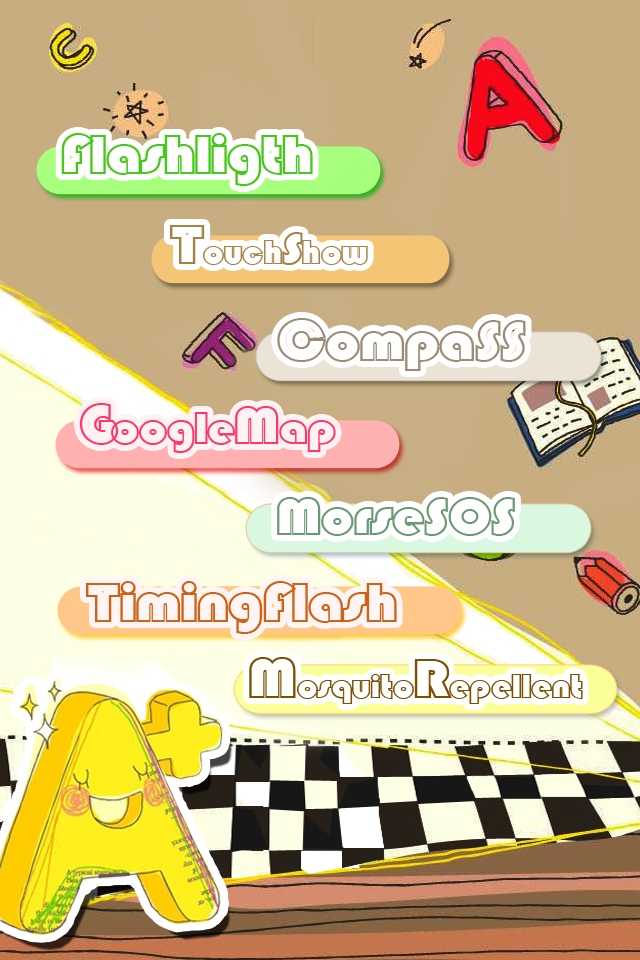
<style>
.page{position:relative;width:640px;height:960px;background:#c7ad80}
.page>*{position:absolute;margin:0}
.t1{font:56.2px "STCaiyun";color:#45c917;scale:1.11 1}
.t2{font:33.8px "STCaiyun";color:#a58244;scale:1.11 1}
.t3{font:56.2px "STCaiyun";color:#a58244;scale:1.11 1}
.t4{font:45px "STCaiyun";color:#a58244;scale:1.11 1}
.t5{font:56.2px "STCaiyun";color:#9a8d76;scale:1.11 1}
.t6{font:45px "STCaiyun";color:#ff376b;scale:1.11 1}
.t7{font:56.2px "STCaiyun";color:#ff376b;scale:1.11 1}
.t8{font:52.5px "STCaiyun";color:#ff376b;scale:1.11 1}
.t9{font:52.5px "STCaiyun";color:#6b9974;scale:1.11 1}
.t10{font:56.2px "STCaiyun";color:#cf6213;scale:1.11 1}
.t11{font:33.8px "STCaiyun";color:#7d4f00;scale:1.11 1}
.t12{font:56.2px "STCaiyun";color:#7d4f00;scale:1.11 1}
</style>
<div class="page">
<p class="t1" style="left:61px;top:133px;width:252px;height:53px">Flashligth</p>
<p class="t2" style="left:170px;top:225px;width:198px;height:40px"><span class="t3">T</span>ouch<span class="t4">S</span>how</p>
<p class="t5" style="left:277px;top:318px;width:249px;height:53px">CompaSS</p>
<p class="t6" style="left:79px;top:403px;width:257px;height:50px"><span class="t7">G</span>oogle<span class="t8">M</span>ap</p>
<p class="t9" style="left:277px;top:497px;width:238px;height:39px">MorseSOS</p>
<p class="t10" style="left:86px;top:581px;width:311px;height:53px">TimingFlash</p>
<p class="t11" style="left:249px;top:657px;width:334px;height:47px"><span class="t12">M</span>osquito<span class="t12">R</span>epellent</p>
</div>
